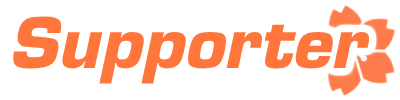
<style>
.page{position:relative;width:400px;height:100px;background:#ffffff}
.page>*{position:absolute;margin:0}
.t1{font:68px "Eurostile-BoldOblique";color:#ff763d}
</style>
<div class="page">
<p class="t1" style="left:13px;top:16px;width:357px;height:68px">Supporter</p>
</div>
